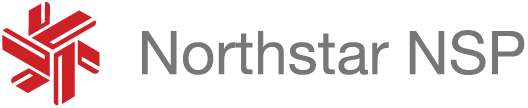
<style>
.page{position:relative;width:528px;height:108px;background:#ffffff}
.page>*{position:absolute;margin:0}
.t1{font:60px "HelveticaNeue";color:#777777}
</style>
<div class="page">
<p class="t1" style="left:142px;top:30px;width:383px;height:45px">Northstar NSP</p>
</div>
